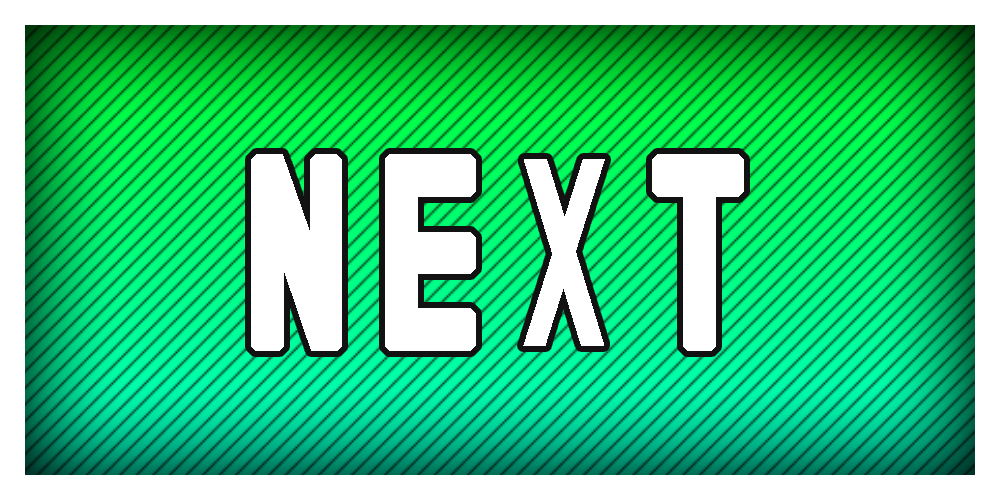
<style>
.page{position:relative;width:1000px;height:500px;background:#ffffff}
.page>*{position:absolute;margin:0}
.t1{font:265.5px "SquareFont";letter-spacing:0.2em;color:#ffffff;font-variant:small-caps;font-weight:bold;scale:0.63 1}
</style>
<div class="page">
<p class="t1" style="left:251px;top:154px;width:493px;height:197px">NEXT</p>
</div>
